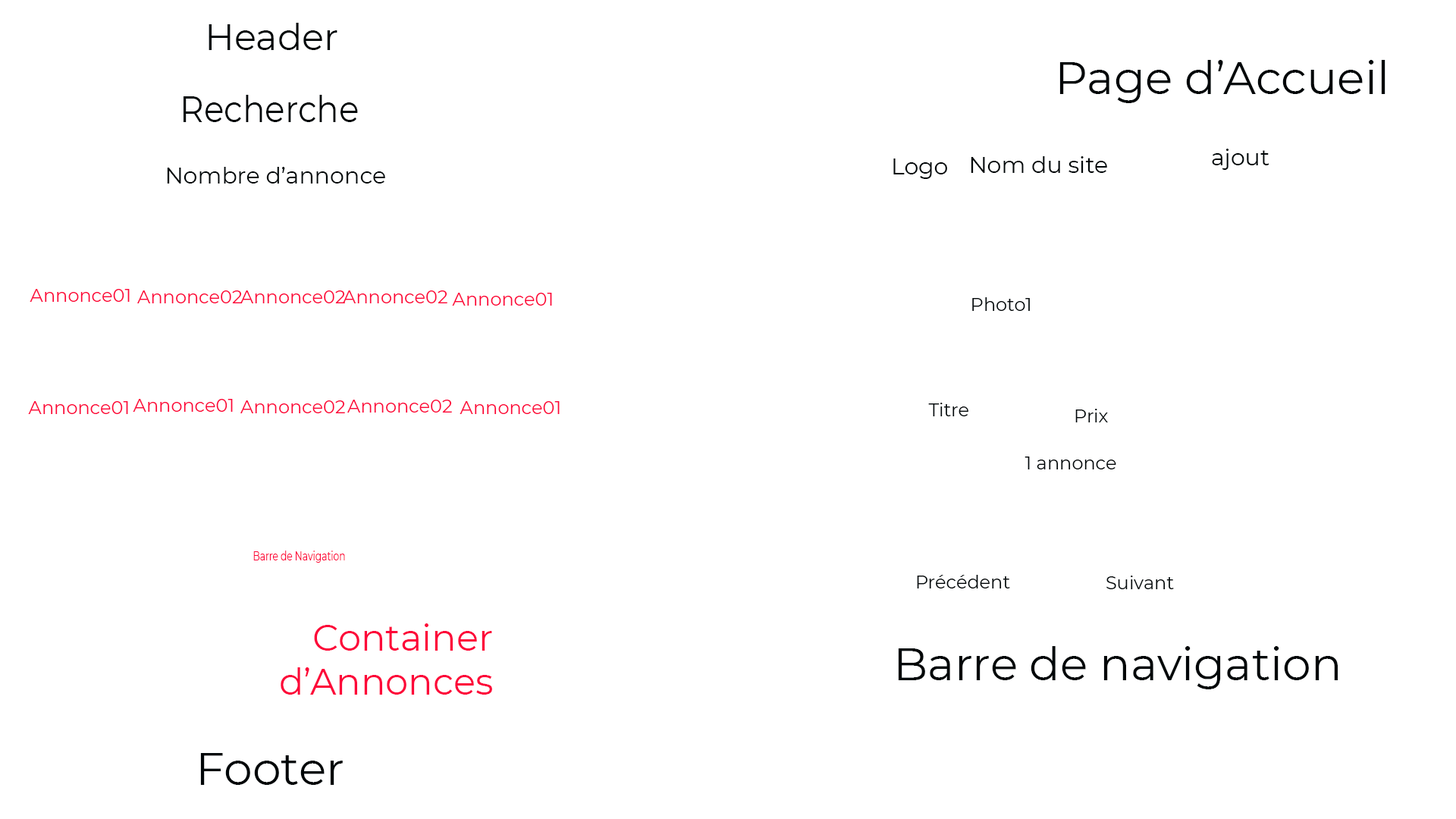
<style>
.page{position:relative;width:1456px;height:819px;background:#ffffff}
.page>*{position:absolute;margin:0}
.t1{font:36.4px "Montserrat-Regular";color:#000608}
.t2{font:45.5px "Montserrat-Regular";color:#000608}
.t3{font:36.4px "Montserrat-Regular";color:#000608;scale:0.91 1}
.t4{font:22.7px "Montserrat-Regular";color:#000608}
.t5{font:18.2px "Montserrat-Regular";color:#fd0439}
.t6{font:18.2px "Montserrat-Regular";color:#000608}
.t7{font:12px "Montserrat-Regular";color:#fd0439;scale:0.77 1}
.t8{font:36.4px "Montserrat-Regular";color:#fd0439}
</style>
<div class="page">
<p class="t1" style="left:209px;top:23px;width:128px;height:27px">Header</p>
<p class="t2" style="left:1059px;top:60px;width:326px;height:43px">Page d’Accueil</p>
<p class="t3" style="left:184px;top:95px;width:174px;height:27px">Recherche</p>
<p class="t4" style="left:1212px;top:149px;width:57px;height:21px">ajout</p>
<p class="t4" style="left:893px;top:158px;width:54px;height:21px">Logo</p>
<p class="t4" style="left:971px;top:156px;width:136px;height:17px">Nom du site</p>
<p class="t4" style="left:167px;top:167px;width:218px;height:17px">Nombre d’annonce</p>
<p class="t5" style="left:30px;top:289px;width:100px;height:13px">Annonce01</p>
<p class="t5" style="left:137px;top:290px;width:105px;height:13px">Annonce02</p>
<p class="t5" style="left:240px;top:290px;width:105px;height:13px">Annonce02</p>
<p class="t5" style="left:343px;top:290px;width:104px;height:13px">Annonce02</p>
<p class="t5" style="left:452px;top:293px;width:100px;height:13px">Annonce01</p>
<p class="t6" style="left:972px;top:297px;width:58px;height:14px">Photo1</p>
<p class="t5" style="left:28px;top:401px;width:100px;height:13px">Annonce01</p>
<p class="t5" style="left:133px;top:399px;width:100px;height:13px">Annonce01</p>
<p class="t5" style="left:240px;top:400px;width:105px;height:13px">Annonce02</p>
<p class="t5" style="left:347px;top:400px;width:105px;height:13px">Annonce02</p>
<p class="t5" style="left:460px;top:401px;width:100px;height:13px">Annonce01</p>
<p class="t6" style="left:928px;top:403px;width:40px;height:13px">Titre</p>
<p class="t6" style="left:1075px;top:409px;width:33px;height:13px">Prix</p>
<p class="t6" style="left:1024px;top:457px;width:92px;height:12px">1 annonce</p>
<p class="t7" style="left:253px;top:551px;width:92px;height:12px">Barre de Navigation</p>
<p class="t6" style="left:917px;top:575px;width:93px;height:13px">Précédent</p>
<p class="t6" style="left:1106px;top:576px;width:68px;height:13px">Suivant</p>
<p class="t8" style="left:281px;top:623px;width:211px;height:72px;text-align:right">Container<br> d’Annonces</p>
<p class="t2" style="left:898px;top:646px;width:440px;height:43px">Barre de navigation</p>
<p class="t2" style="left:200px;top:753px;width:143px;height:32px">Footer</p>
</div>
